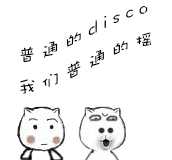
<style>
.page{position:relative;width:172px;height:160px;background:#ffffff}
.page>*{position:absolute;margin:0}
.t1{font:18px "DFWaWaSC-W5";letter-spacing:0.3em;color:#000000}
</style>
<div class="page">
<p class="t1" style="left:20px;top:6px;width:132px;height:88px">普通的disco<br>我们普通的摇</p>
</div>
